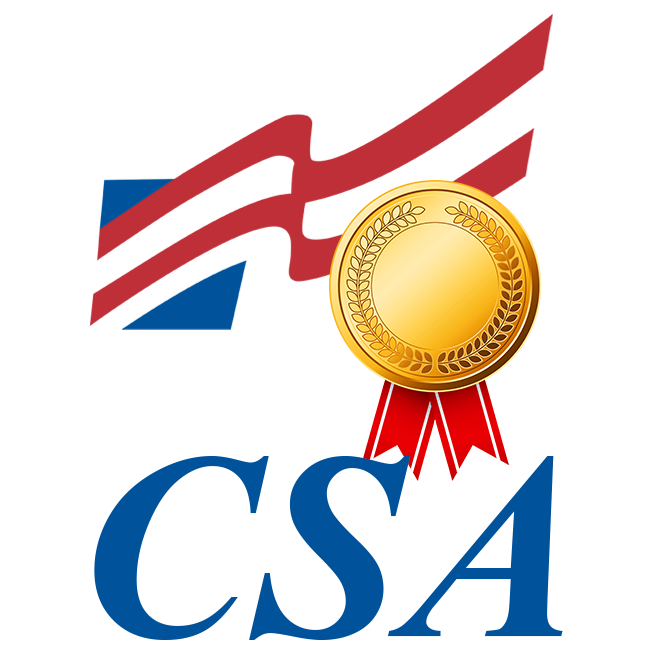
<style>
.page{position:relative;width:653px;height:653px;background:#ffffff}
.page>*{position:absolute;margin:0}
.t1{font:265.8px "TimesNewRomanPS-BoldItalicMT";color:#00529b}
</style>
<div class="page">
<p class="t1" style="left:94px;top:456px;width:469px;height:184px">CSA</p>
</div>
